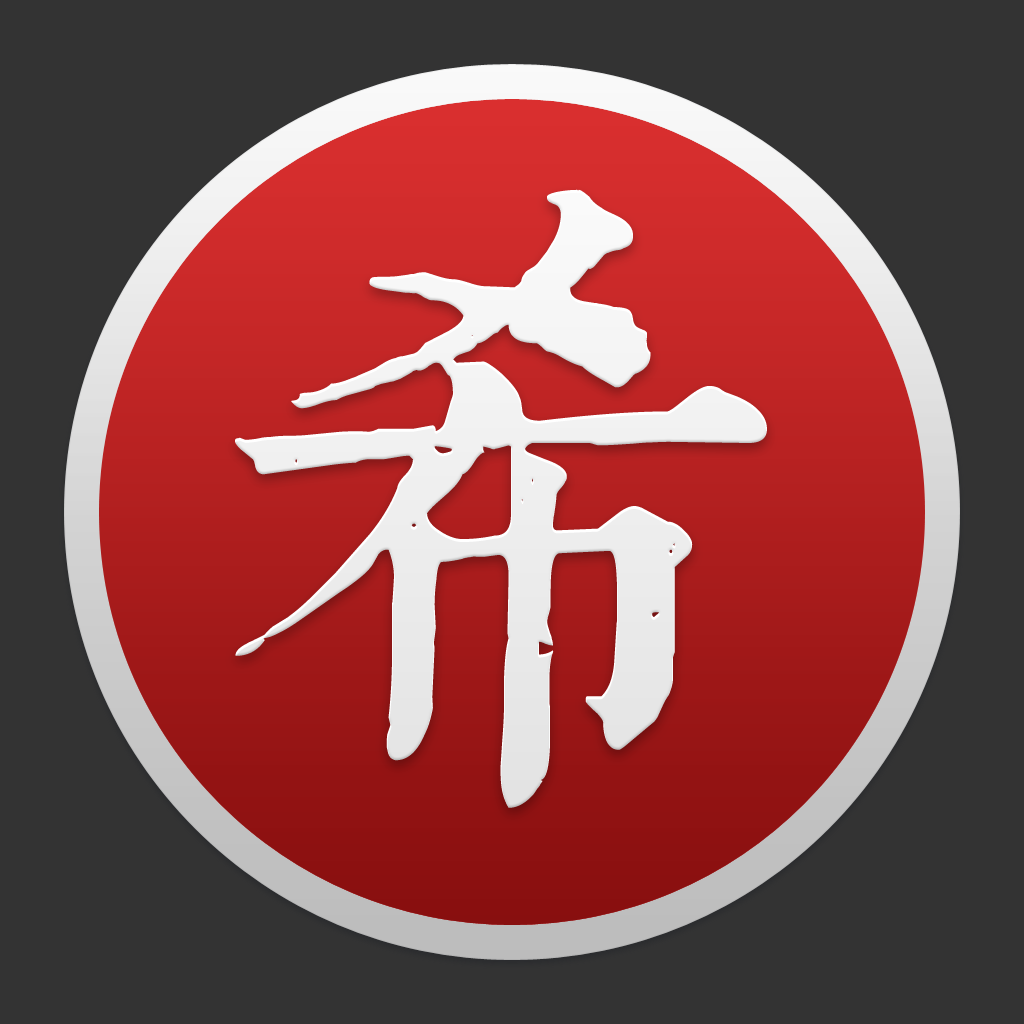
<style>
.page{position:relative;width:1024px;height:1024px;background:#333333}
.page>*{position:absolute;margin:0}
.t1{font:580px "TpldKhangXiDictDemo";color:#ffffff}
</style>
<div class="page">
<p class="t1" style="left:235px;top:189px;width:532px;height:619px">希</p>
</div>
